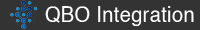
<style>
.page{position:relative;width:200px;height:30px;background:#333333}
.page>*{position:absolute;margin:0}
.t1{font:20.8px "Helvetica";letter-spacing:0.025em;color:#ffffff;scale:0.95 1}
</style>
<div class="page">
<p class="t1" style="left:45px;top:6px;width:149px;height:20px">QBO Integration</p>
</div>
